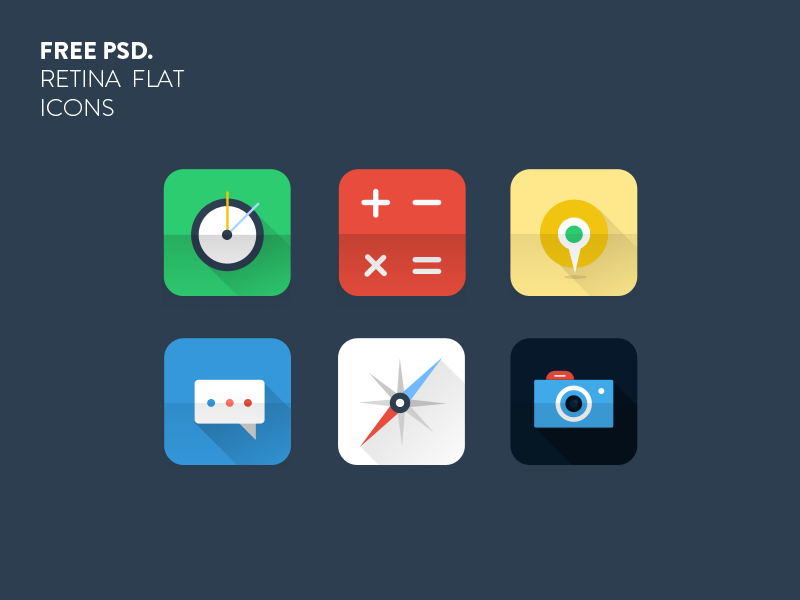
<style>
.page{position:relative;width:800px;height:600px;background:#2c3e50}
.page>*{position:absolute;margin:0}
.t1{font:24px "BrandonGrotesque-Light";color:#ffffff}
.t2{font:24px "BrandonGrotesque-Black";color:#ffffff}
</style>
<div class="page">
<p class="t1" style="left:41px;top:42px;width:144px;height:74px"><span class="t2">FREE PSD.   <br></span>RETINA  FLAT<br>ICONS</p>
</div>
